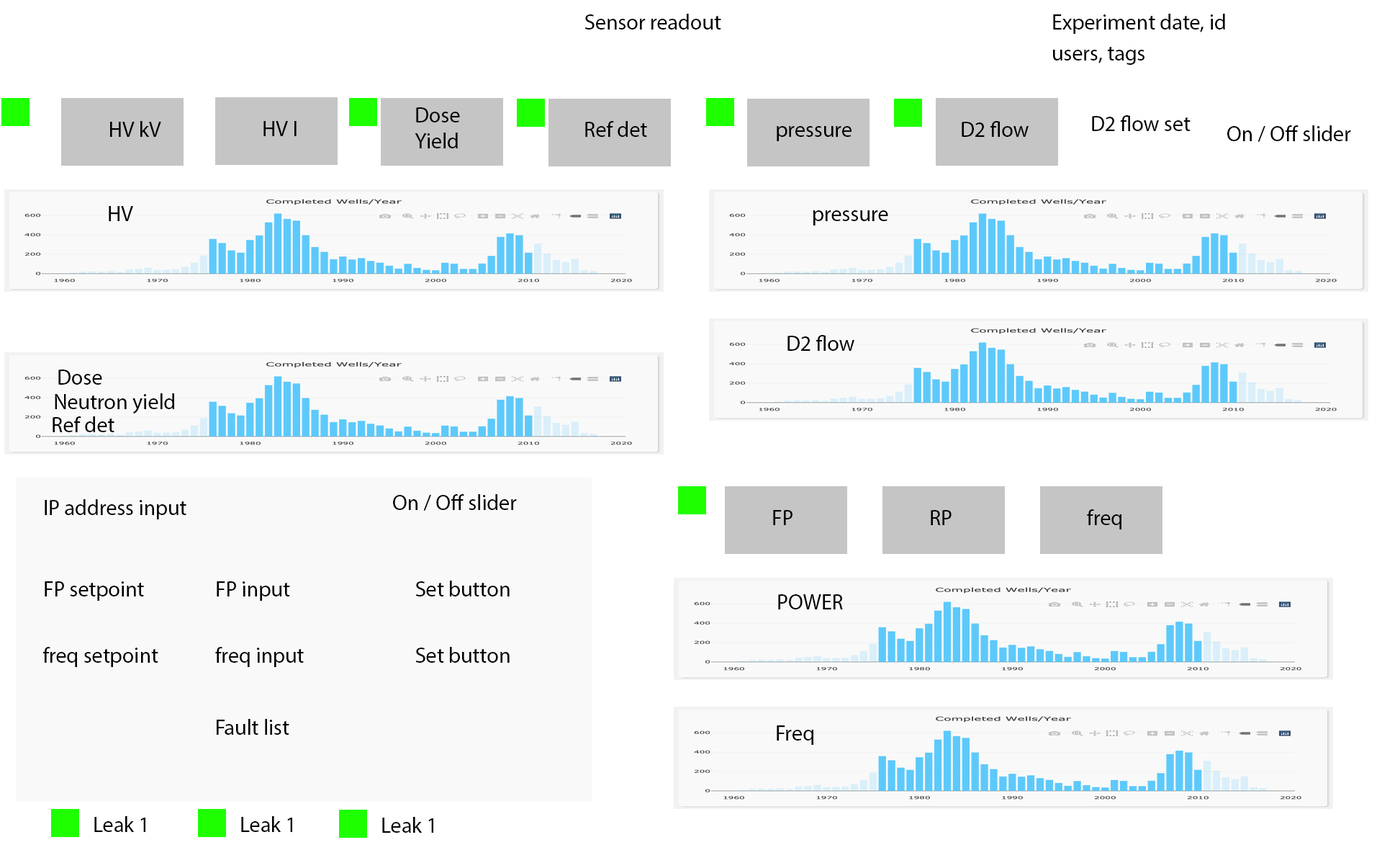
<style>
.page{position:relative;width:1382px;height:863px;background:#ffffff}
.page>*{position:absolute;margin:0}
.t1{font:21.6px "MyriadPro-Regular";color:#000000}
</style>
<div class="page">
<p class="t1" style="left:585px;top:14px;width:136px;height:16px">Sensor readout</p>
<p class="t1" style="left:1053px;top:14px;width:172px;height:20px">Experiment date, id</p>
<p class="t1" style="left:1053px;top:46px;width:92px;height:19px">users, tags</p>
<p class="t1" style="left:415px;top:107px;width:45px;height:41px">Dose<br>Yield</p>
<p class="t1" style="left:110px;top:121px;width:51px;height:16px">HV kV</p>
<p class="t1" style="left:264px;top:121px;width:33px;height:15px">HV I</p>
<p class="t1" style="left:585px;top:121px;width:62px;height:16px">Ref det</p>
<p class="t1" style="left:962px;top:121px;width:67px;height:16px">D2 flow</p>
<p class="t1" style="left:1092px;top:115px;width:99px;height:16px">D2 flow set</p>
<p class="t1" style="left:1228px;top:125px;width:123px;height:17px">On / Off slider</p>
<p class="t1" style="left:777px;top:126px;width:75px;height:15px">pressure</p>
<p class="t1" style="left:109px;top:206px;width:24px;height:15px">HV</p>
<p class="t1" style="left:814px;top:210px;width:74px;height:15px">pressure</p>
<p class="t1" style="left:788px;top:335px;width:67px;height:16px">D2 flow</p>
<p class="t1" style="left:58px;top:369px;width:44px;height:15px">Dose</p>
<p class="t1" style="left:55px;top:393px;width:119px;height:21px">Neutron yield</p>
<p class="t1" style="left:53px;top:416px;width:61px;height:16px">Ref det</p>
<p class="t1" style="left:393px;top:494px;width:124px;height:16px">On / Off slider</p>
<p class="t1" style="left:45px;top:499px;width:141px;height:20px">IP address input</p>
<p class="t1" style="left:773px;top:510px;width:20px;height:15px">FP</p>
<p class="t1" style="left:931px;top:510px;width:21px;height:15px">RP</p>
<p class="t1" style="left:1087px;top:509px;width:35px;height:20px">freq</p>
<p class="t1" style="left:45px;top:581px;width:99px;height:19px">FP setpoint</p>
<p class="t1" style="left:217px;top:581px;width:73px;height:19px">FP input</p>
<p class="t1" style="left:415px;top:580px;width:95px;height:16px">Set button</p>
<p class="t1" style="left:778px;top:594px;width:65px;height:15px">POWER</p>
<p class="t1" style="left:43px;top:647px;width:115px;height:20px">freq setpoint</p>
<p class="t1" style="left:215px;top:647px;width:89px;height:20px">freq input</p>
<p class="t1" style="left:415px;top:647px;width:95px;height:15px">Set button</p>
<p class="t1" style="left:217px;top:719px;width:72px;height:15px">Fault list</p>
<p class="t1" style="left:777px;top:725px;width:37px;height:19px">Freq</p>
<p class="t1" style="left:94px;top:816px;width:51px;height:16px">Leak 1</p>
<p class="t1" style="left:241px;top:816px;width:51px;height:16px">Leak 1</p>
<p class="t1" style="left:382px;top:816px;width:51px;height:16px">Leak 1</p>
</div>
